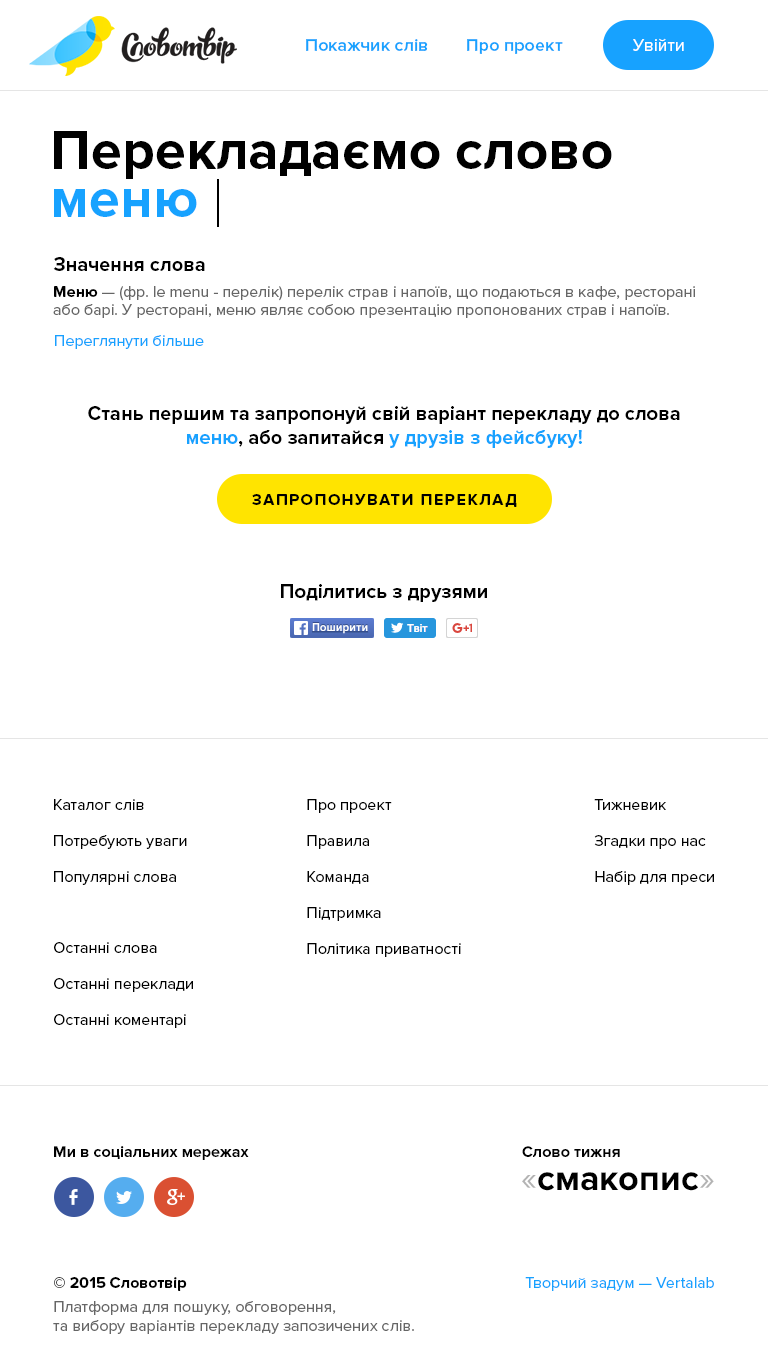
<style>
.page{position:relative;width:768px;height:1371px;background:#ffffff}
.page>*{position:absolute;margin:0}
.t1{font:18px "ProximaNova-Semibold";color:#17a2ff}
.t2{font:18px "ProximaNova-Regular";color:#ffffff}
.t3{font:56px "ProximaNova-Bold";color:#000000}
.t4{font:56px "ProximaNova-Bold";color:#17a2ff}
.t5{font:20px "ProximaNova-Bold";color:#000000}
.t6{font:16px/18px "ProximaNova-Regular";color:#666666}
.t7{font:16px/18px "ProximaNova-Bold";color:#000000}
.t8{font:16px "ProximaNova-Regular";color:#17a2ff}
.t9{font:20px "ProximaNova-Bold";color:#17a2ff}
.t10{font:16px "ProximaNova-Bold";letter-spacing:0.1em;color:#000000;text-transform:uppercase}
.t11{font:16px/36px "ProximaNova-Regular";color:#000000}
.t12{font:16px/36px "ProximaNova-Regular";color:#010101}
.t13{font:16px "ProximaNova-Bold";color:#010101}
.t14{font:36px "ProximaNova-Bold";color:#000000}
.t15{font:36px "ProximaNova-Regular";color:#b3b3b3}
.t16{font:16px "ProximaNova-Regular";color:#666666}
.t17{font:16px/22px "ProximaNova-Bold";color:#000000}
.t18{font:16px/24px "ProximaNova-Regular";color:#666666}
</style>
<div class="page">
<p class="t1" style="left:306px;top:39px;width:122px;height:12px">Покажчик слів</p>
<p class="t1" style="left:467px;top:39px;width:96px;height:15px">Про проект</p>
<p class="t2" style="left:633px;top:38px;width:51px;height:13px">Увійти</p>
<p class="t3" style="left:54px;top:131px;width:558px;height:48px">Перекладаємо слово</p>
<p class="t4" style="left:54px;top:189px;width:143px;height:28px">меню</p>
<p class="t5" style="left:53px;top:257px;width:152px;height:14px">Значення слова</p>
<p class="t6" style="left:53px;top:286px;width:642px;height:32px"><span class="t7">Меню</span> — (фр. le menu - перелік) перелік страв і напоїв, що подаються в кафе, ресторані або барі. У ресторані, меню являє собою презентацію пропонованих страв і напоїв.</p>
<p class="t8" style="left:55px;top:335px;width:149px;height:14px">Переглянути більше</p>
<p class="t5" style="left:88px;top:406px;width:592px;height:42px;text-align:center">Стань першим та запропонуй свій варіант перекладу до слова<br><span class="t9">меню</span>, або запитайся <span class="t9">у друзів з фейсбуку!</span></p>
<p class="t10" style="left:252px;top:494px;width:265px;height:13px">Запропонувати переклад</p>
<p class="t5" style="left:281px;top:584px;width:206px;height:18px">Поділитись з друзями</p>
<p class="t11" style="left:54px;top:799px;width:133px;height:86px">Каталог слів<br>Потребують уваги<br>Популярні слова</p>
<p class="t11" style="left:307px;top:799px;width:154px;height:158px">Про проект<br>Правила<br>Команда<br>Підтримка<br>Політика приватності</p>
<p class="t12" style="left:594px;top:799px;width:120px;height:86px">Тижневик<br>Згадки про нас<br>Набір для преси</p>
<p class="t11" style="left:54px;top:942px;width:139px;height:86px">Останні слова<br>Останні переклади<br>Останні коментарі</p>
<p class="t13" style="left:54px;top:1146px;width:195px;height:14px">Ми в соціальних мережах</p>
<p class="t13" style="left:522px;top:1146px;width:98px;height:11px">Слово тижня</p>
<p class="t14" style="left:522px;top:1172px;width:192px;height:19px"><span class="t15">«</span>смакопис<span class="t15">»</span></p>
<p class="t16" style="left:53px;top:1277px;width:361px;height:57px"><span class="t17">© 2015 Словотвір<br></span><span class="t18">Платформа для пошуку, обговорення,<br></span>та вибору варіантів перекладу запозичених слів.</p>
<p class="t8" style="left:525px;top:1277px;width:189px;height:14px">Творчий задум — Vertalab</p>
</div>
